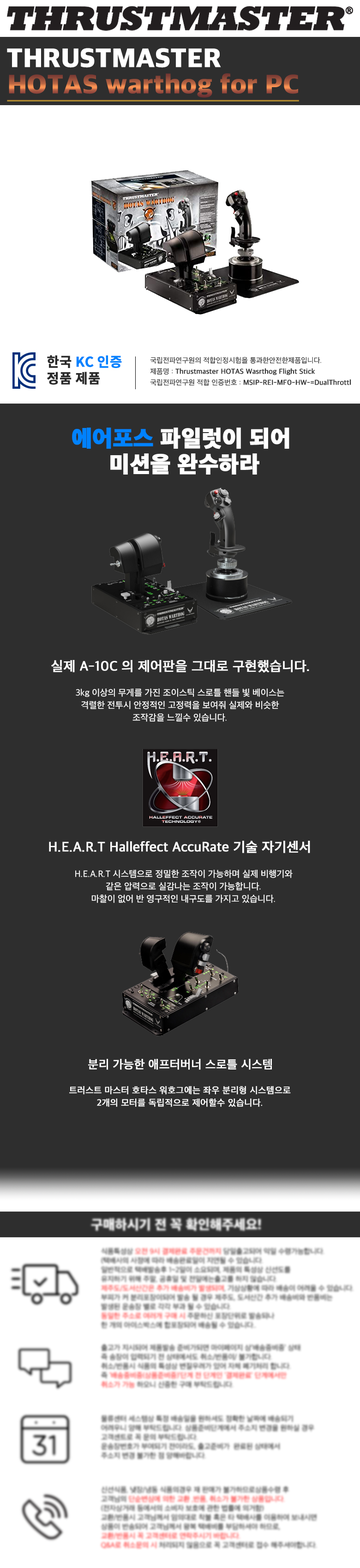
<style>
.page{position:relative;width:360px;height:1568px;background:#2e2e2e}
.page>*{position:absolute;margin:0}
.t1{font:27.7px "AppleSDGothicNeoH00";color:#ffffff;text-transform:uppercase}
.t2{font:27.7px "AppleSDGothicNeoH00";text-decoration:underline}
.t3{font:27.7px "AppleSDGothicNeoH00";text-transform:uppercase;text-decoration:underline}
.t4{font:7.4px/11.1px "AppleSDGothicNeoM00";color:#2e2e2e;font-weight:bold}
.t5{font:7.4px/11.1px "AppleSDGothicNeoM00";color:#2e2e2e;text-transform:uppercase}
.t6{font:7.4px/11.1px "AppleSDGothicNeoM00";color:#2e2e2e}
.t7{font:23.1px/25.8px "AppleSDGothicNeoH00";color:#ffffff;font-weight:bold}
.t8{font:23.1px/25.8px "AppleSDGothicNeoH00";color:#0082fe;font-weight:bold}
.t9{font:13.8px "AppleSDGothicNeoM00";color:#ffffff;font-weight:bold}
.t10{font:9.2px/12.5px "AppleSDGothicNeoM00";color:#ffffff}
.t11{font:12px "AppleSDGothicNeoM00";color:#ffffff;font-weight:bold}
.t12{font:9.2px/12.5px "AppleSDGothicNeoM00";color:#ffffff;font-weight:bold}
</style>
<div class="page">
<p class="t1" style="left:7px;top:48px;width:214px;height:20px">Thrustmaster</p>
<p class="t2" style="left:7px;top:73px;width:292px;height:28px"><span class="t3">HOTAS </span>warthog for PC</p>
<p class="t4" style="left:150px;top:357px;width:201px;height:29px"><span class="t5">국립전파연구원의 적합인정시험을 통과한안전한제품입니다.  <br>제품명 : </span>Thrustmaster HOTAS Wasrthog Flight Stick<br><span class="t6">국립전파연구원 적합 인증번호 : </span>MSIP-REI-MF0-HW-=DualThrottl</p>
<p class="t7" style="left:72px;top:428px;width:217px;height:47px;text-align:center"><span class="t8">에어포스</span> 파일럿이 되어 <br>미션을 완수하라</p>
<p class="t9" style="left:51px;top:660px;width:258px;height:13px">실제 A-10C 의 제어판을 그대로 구현했습니다.</p>
<p class="t10" style="left:76px;top:688px;width:208px;height:34px;text-align:center">3kg 이상의 무게를 가진 조이스틱 스로틀 핸들 빛 베이스는<br>격렬한 전투시 안정적인 고정력을 보여줘 실제와 비슷한<br>조작감을 느낄수 있습니다.</p>
<p class="t9" style="left:49px;top:841px;width:261px;height:12px">H.E.A.R.T Halleffect AccuRate 기술 자기센서</p>
<p class="t10" style="left:75px;top:869px;width:217px;height:34px;text-align:center">H.E.A.R.T 시스템으로 정밀한 조작이 가능하며 실제 비행기와<br>같은 압력으로 실감나는 조작이 가능합니다.<br>마찰이 없어 반 영구적인 내구도를 가지고 있습니다.</p>
<p class="t11" style="left:88px;top:1059px;width:184px;height:11px">분리 가능한 애프터버너 스로틀 시스템</p>
<p class="t12" style="left:69px;top:1086px;width:222px;height:21px;text-align:center">트러스트 마스터 호타스 워호그에는 좌우 분리형 시스템으로<br>2개의 모터를 독립적으로 제어할수 있습니다.</p>
</div>
